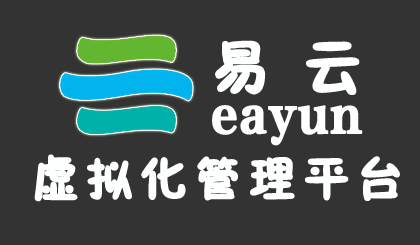
<style>
.page{position:relative;width:420px;height:245px;background:#333333}
.page>*{position:absolute;margin:0}
.t1{font:60px "FZSEJW--GB1-0";letter-spacing:0.1em;color:#feffff;font-weight:bold}
.t2{font:48px "FZFYSJW--GB1-0";color:#feffff;font-weight:bold}
.t3{font:48px "FZSEJW--GB1-0";letter-spacing:0.1em;color:#feffff;font-weight:bold}
</style>
<div class="page">
<p class="t1" style="left:215px;top:40px;width:145px;height:55px">易 云</p>
<p class="t2" style="left:212px;top:105px;width:151px;height:41px">eayun</p>
<p class="t3" style="left:34px;top:154px;width:366px;height:48px">虚拟化管理平台</p>
</div>
